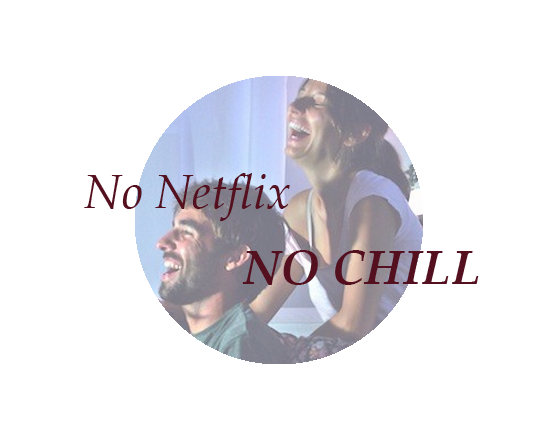
<style>
.page{position:relative;width:542px;height:439px;background:#ffffff}
.page>*{position:absolute;margin:0}
.t1{font:48px "PalatinoLinotype-Italic";color:#54101f}
.t2{font:48px "PalatinoLinotype-BoldItalic";color:#54101f}
</style>
<div class="page">
<p class="t1" style="left:84px;top:173px;width:206px;height:48px">No Netflix</p>
<p class="t2" style="left:242px;top:250px;width:237px;height:35px">NO CHILL</p>
</div>
